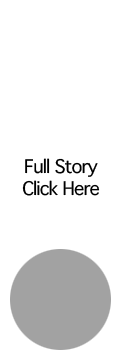
<style>
.page{position:relative;width:120px;height:360px;background:#ffffff}
.page>*{position:absolute;margin:0}
.t1{font:18px "Thonburi";letter-spacing:-0.05em;color:#000000}
</style>
<div class="page">
<p class="t1" style="left:22px;top:158px;width:78px;height:38px;text-align:center">Full Story<br>Click Here</p>
</div>
